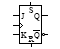
<style>
.page{position:relative;width:60px;height:49px;background:#ffffff}
.page>*{position:absolute;margin:0}
.t1{font:8px "TimesNewRomanPSMT";color:#000000;font-variant:small-caps}
</style>
<div class="page">
<p class="t1" style="left:21px;top:13px;width:4px;height:6px">J</p>
<p class="t1" style="left:29px;top:7px;width:5px;height:6px">S</p>
<p class="t1" style="left:34px;top:13px;width:6px;height:8px">Q</p>
<p class="t1" style="left:21px;top:32px;width:6px;height:6px">K</p>
<p class="t1" style="left:34px;top:32px;width:6px;height:8px">Q</p>
</div>
